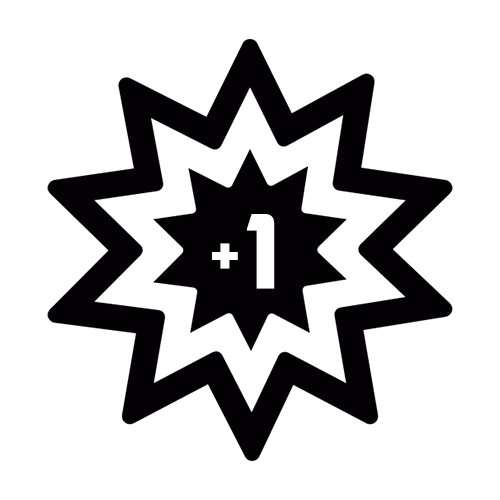
<style>
.page{position:relative;width:500px;height:500px;background:#ffffff}
.page>*{position:absolute;margin:0}
.t1{font:100px "Akashi";letter-spacing:-0.2em;color:#ffffff;font-weight:bold}
.t2{font:50px "Akashi";letter-spacing:-0.2em;color:#ffffff;font-weight:bold}
</style>
<div class="page">
<p class="t1" style="left:247px;top:214px;width:28px;height:75px">1</p>
<p class="t2" style="left:212px;top:243px;width:26px;height:26px">+</p>
</div>
